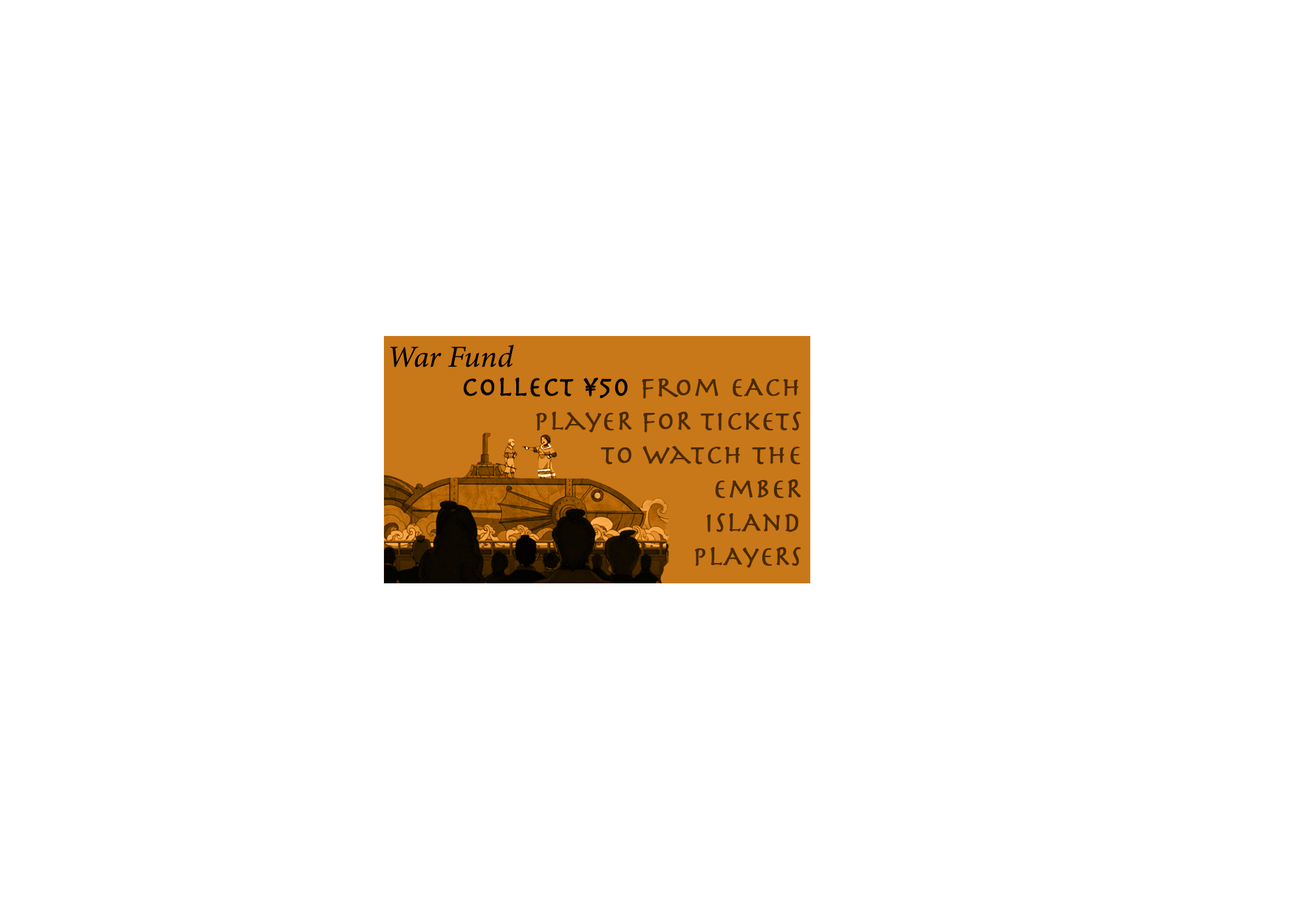
<style>
.page{position:relative;width:1292px;height:923px;background:#ffffff}
.page>*{position:absolute;margin:0}
.t1{font:30.8px "MinionConceptItalic-MediumItalic";color:#000000;font-weight:bold}
.t2{font:28.2px "Herculanum";color:#000000;font-weight:bold}
.t3{font:28.2px "Herculanum";color:#4d310e;font-weight:bold}
</style>
<div class="page">
<p class="t1" style="left:390px;top:345px;width:124px;height:22px">War Fund</p>
<p class="t2" style="left:463px;top:377px;width:165px;height:22px">collect ¥50</p>
<p class="t3" style="left:536px;top:378px;width:265px;height:190px;text-align:right">from eAch<br>playeR foR tickets<br>to watch the<br>embeR<br>islAnd<br>plAyeRs</p>
</div>
